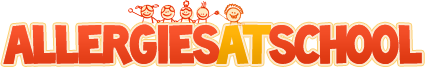
<style>
.page{position:relative;width:425px;height:68px;background:#ffffff}
.page>*{position:absolute;margin:0}
.t1{font:49.6px "Toonish";letter-spacing:-0.02em;color:#ef4a23}
.t2{font:49.6px "Toonish";letter-spacing:-0.02em;color:#ffc700}
.t3{font:49.6px "Toonish";letter-spacing:-0.02em;color:#ea451e}
.t4{font:49.6px "Toonish";letter-spacing:-0.02em;color:#f7ab01}
</style>
<div class="page">
<p class="t1" style="left:3px;top:24px;width:419px;height:41px;opacity:0.55">allergies<span class="t2">at</span><span class="t3">School</span></p>
<p class="t1" style="left:3px;top:24px;width:419px;height:41px;opacity:0.55">Allergies<span class="t2">At</span><span class="t3">School</span></p>
<p class="t1" style="left:3px;top:24px;width:419px;height:41px">Allergies<span class="t4">At</span><span class="t3">School</span></p>
</div>
